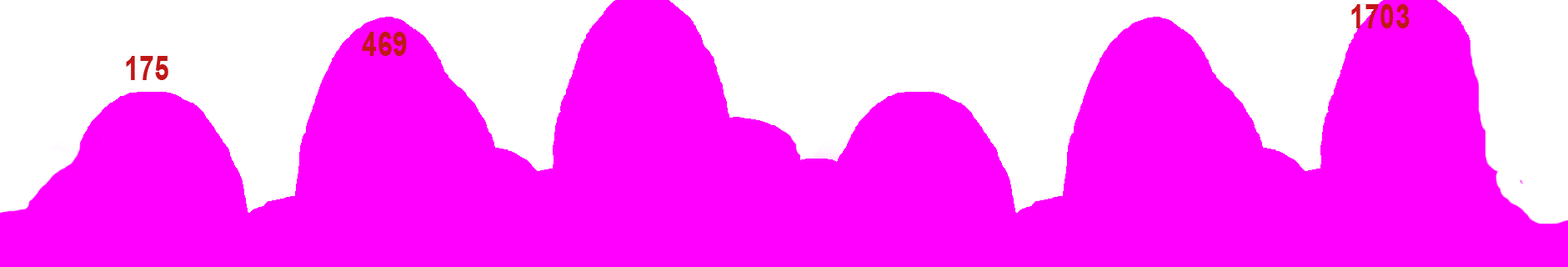
<style>
.page{position:relative;width:1568px;height:267px;background:#ff00ff}
.page>*{position:absolute;margin:0}
.t1{font:33px "Arial-BoldMT";letter-spacing:0.01em;color:#c01717;scale:0.82 1}
</style>
<div class="page">
<p class="t1" style="left:1351px;top:4px;width:59px;height:24px">1703</p>
<p class="t1" style="left:362px;top:32px;width:45px;height:24px">469</p>
<p class="t1" style="left:126px;top:56px;width:42px;height:24px">175</p>
</div>
